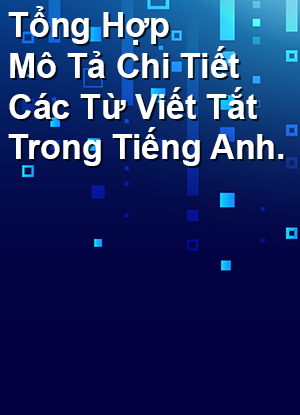
<style>
.page{position:relative;width:300px;height:415px;background:#020041}
.page>*{position:absolute;margin:0}
.t1{font:34px "Arial-BoldMT";color:#ffffff}
</style>
<div class="page">
<p class="t1" style="left:8px;top:6px;width:276px;height:160px">Tổng Hợp<br>Mô Tả Chi Tiết<br>Các Từ Viết Tắt<br>Trong Tiếng Anh.</p>
</div>
